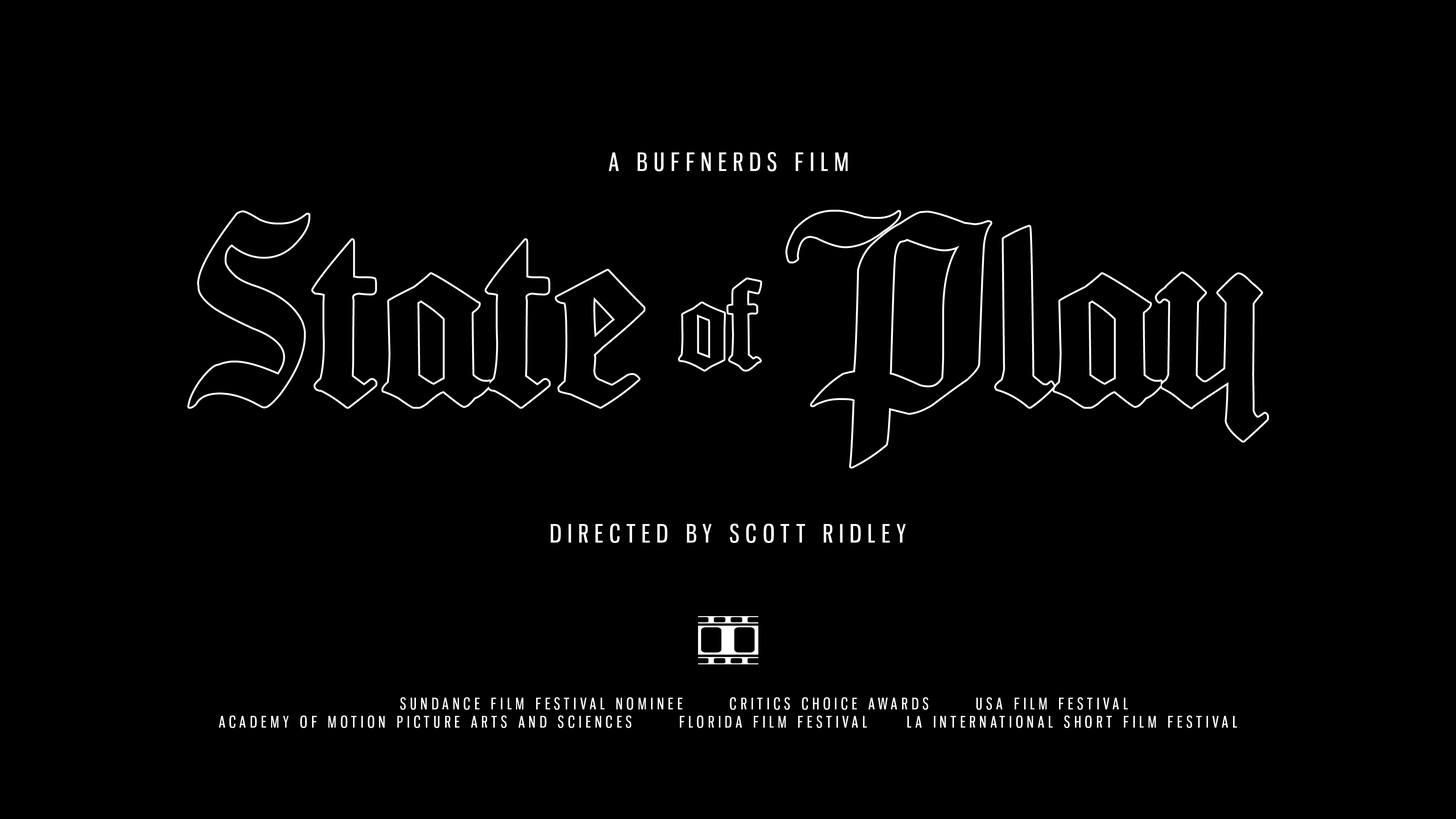
<style>
.page{position:relative;width:1456px;height:819px;background:#000000}
.page>*{position:absolute;margin:0}
.t1{font:24.9px "GnuolaneRg-Regular";letter-spacing:0.25em;color:#ffffff}
.t2{font:15.5px/5.9px "GnuolaneRg-Regular";letter-spacing:0.25em;color:#ffffff}
</style>
<div class="page">
<p class="t1" style="left:609px;top:152px;width:239px;height:19px">A BUFFNERDS FILM</p>
<p class="t1" style="left:551px;top:524px;width:355px;height:19px">DIRECTED BY SCOTT RIDLEY</p>
<p class="t2" style="left:219px;top:697px;width:1018px;height:31px;text-align:center">SUNDANCE FILM FESTIVAL NOMINEE      CRITICS CHOICE AWARDS      USA FILM FESTIVAL<br>ACADEMY OF MOTION PICTURE ARTS AND SCIENCES      FLORIDA FILM FESTIVAL     LA INTERNATIONAL SHORT FILM FESTIVAL</p>
</div>
